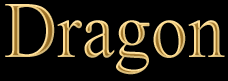
<style>
.page{position:relative;width:228px;height:81px;background:#000000}
.page>*{position:absolute;margin:0}
.t1{font:80px "MongolianBaiti";scale:0.92 1}
</style>
<div class="page">
<p class="t1" style="left:5px;top:4px;width:220px;height:71px">Dragon</p>
</div>
